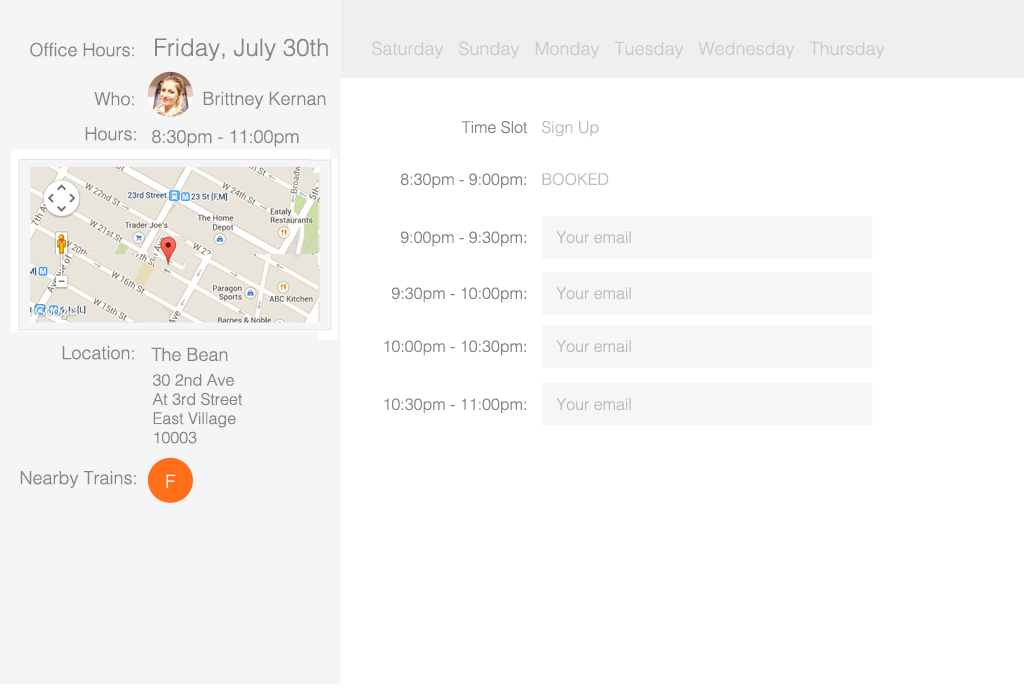
<style>
.page{position:relative;width:1024px;height:700px;background:#ffffff}
.page>*{position:absolute;margin:0}
.t1{font:24px "Helvetica-Light";color:#868686}
.t2{font:18px "Helvetica-Light";color:#cbcbcb}
.t3{font:18px "Helvetica-Light";color:#868686}
.t4{font:16px "Helvetica-Light";color:#868686}
.t5{font:16px "Helvetica-Light";color:#bdbdbd}
.t6{font:18px "Helvetica-Light";color:#ffffff}
</style>
<div class="page">
<p class="t1" style="left:155px;top:38px;width:173px;height:23px">Friday, July 30th</p>
<p class="t2" style="left:372px;top:41px;width:513px;height:18px">Saturday   Sunday   Monday   Tuesday   Wednesday   Thursday</p>
<p class="t3" style="left:30px;top:42px;width:104px;height:15px">Office Hours:</p>
<p class="t3" style="left:94px;top:92px;width:40px;height:14px">Who:</p>
<p class="t3" style="left:203px;top:91px;width:123px;height:18px">Brittney Kernan</p>
<p class="t4" style="left:461px;top:121px;width:67px;height:13px">Time Slot</p>
<p class="t5" style="left:542px;top:121px;width:57px;height:16px">Sign Up</p>
<p class="t3" style="left:85px;top:127px;width:51px;height:14px">Hours:</p>
<p class="t3" style="left:152px;top:130px;width:147px;height:17px">8:30pm - 11:00pm</p>
<p class="t4" style="left:400px;top:173px;width:126px;height:16px">8:30pm - 9:00pm:</p>
<p class="t5" style="left:542px;top:173px;width:67px;height:13px">BOOKED</p>
<p class="t4" style="left:400px;top:231px;width:126px;height:16px">9:00pm - 9:30pm:</p>
<p class="t5" style="left:556px;top:231px;width:75px;height:13px">Your email</p>
<p class="t4" style="left:392px;top:287px;width:134px;height:16px">9:30pm - 10:00pm:</p>
<p class="t5" style="left:556px;top:287px;width:75px;height:13px">Your email</p>
<p class="t4" style="left:384px;top:340px;width:142px;height:16px">10:00pm - 10:30pm:</p>
<p class="t5" style="left:556px;top:340px;width:75px;height:13px">Your email</p>
<p class="t3" style="left:62px;top:346px;width:72px;height:14px">Location:</p>
<p class="t3" style="left:151px;top:347px;width:77px;height:15px">The Bean</p>
<p class="t4" style="left:152px;top:374px;width:90px;height:70px">30 2nd Ave<br>At 3rd Street<br>East Village<br>10003</p>
<p class="t4" style="left:384px;top:398px;width:142px;height:16px">10:30pm - 11:00pm:</p>
<p class="t5" style="left:556px;top:398px;width:75px;height:13px">Your email</p>
<p class="t3" style="left:20px;top:471px;width:116px;height:17px">Nearby Trains:</p>
<p class="t6" style="left:166px;top:474px;width:10px;height:14px">F</p>
</div>
